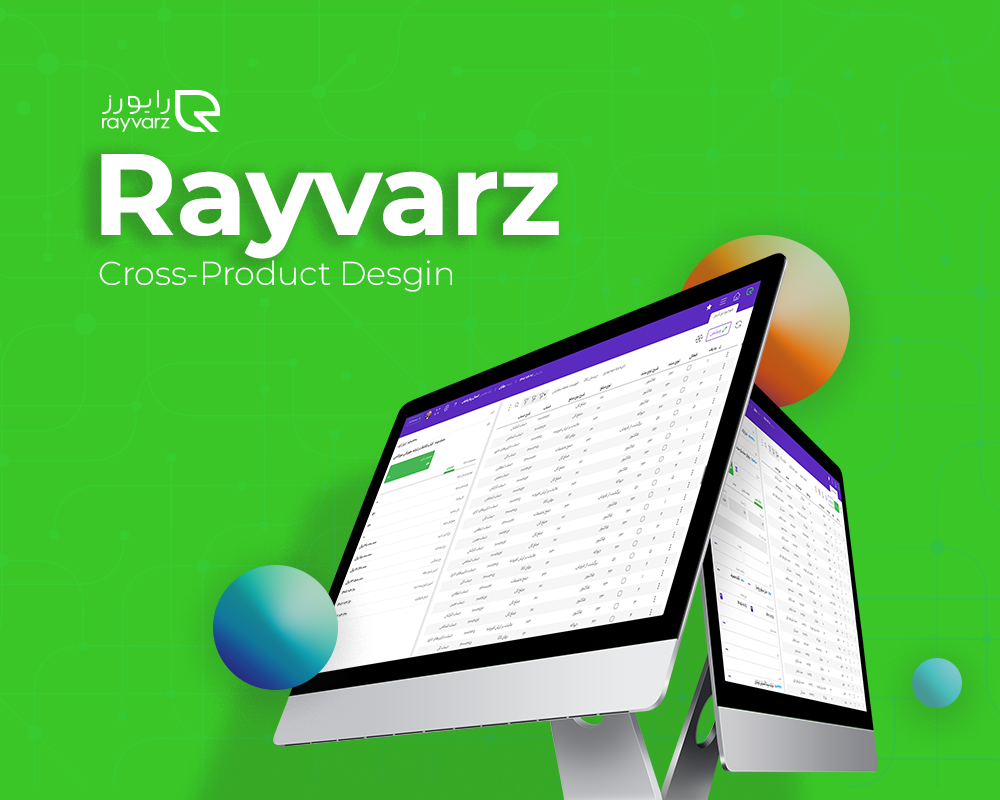
<style>
.page{position:relative;width:1000px;height:800px;background:#39c626}
.page>*{position:absolute;margin:0}
.t1{font:115.6px "Montserrat-Bold";letter-spacing:-0.005em;color:#ffffff}
.t2{font:33.3px "Montserrat-Light";letter-spacing:-0.005em;color:#ffffff}
</style>
<div class="page">
<p class="t1" style="left:101px;top:154px;width:458px;height:105px">Rayvarz</p>
<p class="t2" style="left:99px;top:260px;width:353px;height:32px">Cross-Product Desgin</p>
</div>
